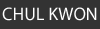
<style>
.page{position:relative;width:100px;height:29px;background:#333333}
.page>*{position:absolute;margin:0}
.t1{font:18px "MyriadPro-Regular";color:#ffffff}
</style>
<div class="page">
<p class="t1" style="left:2px;top:7px;width:95px;height:14px">CHUL KWON</p>
</div>
